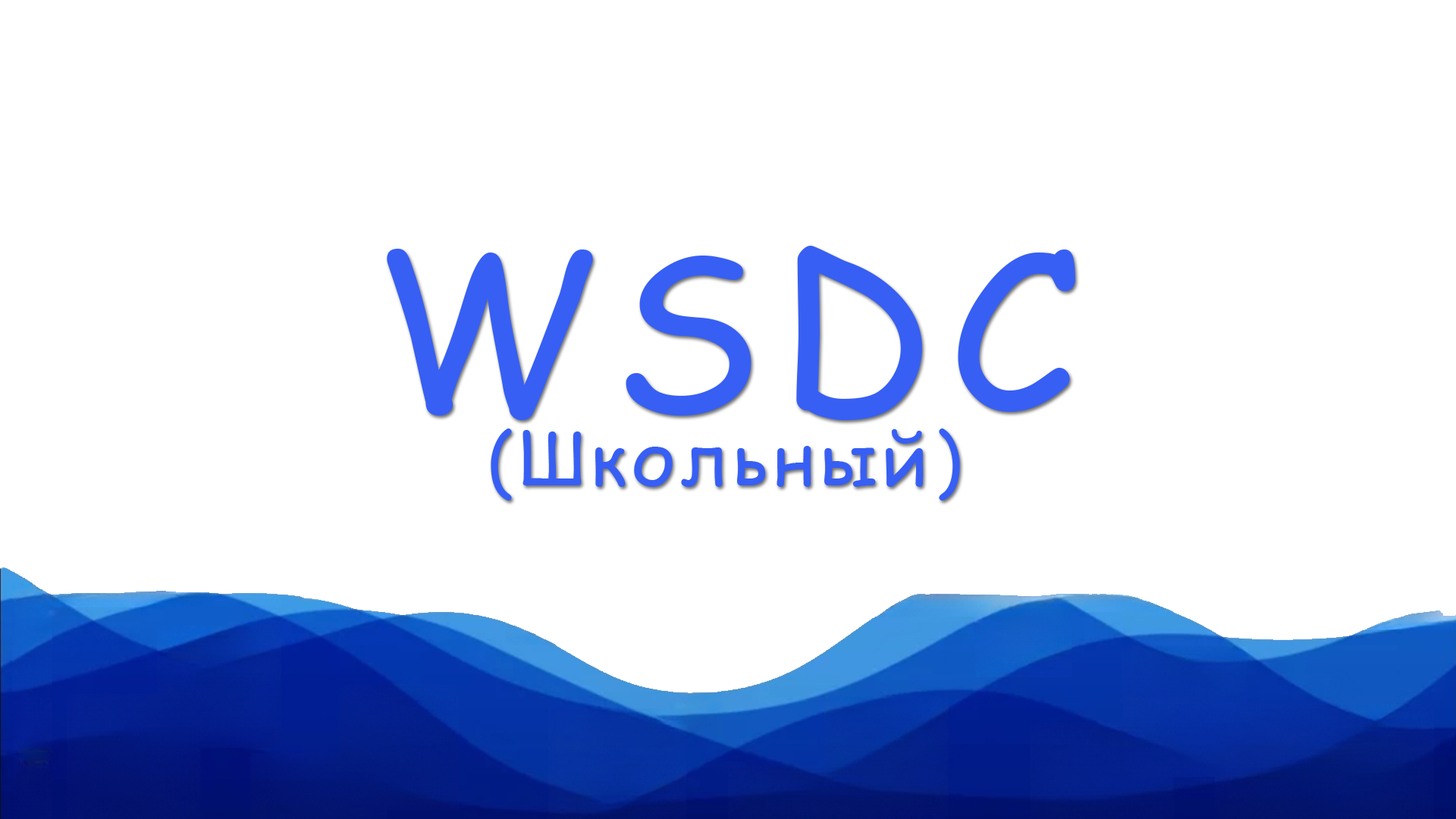
<style>
.page{position:relative;width:1456px;height:819px;background:#ffffff}
.page>*{position:absolute;margin:0}
.t1{font:215.1px "ComicSansMS";letter-spacing:0.075em;color:#375ff4}
.t2{font:72.7px "ComicSansMS";letter-spacing:0.075em;color:#375ff4}
</style>
<div class="page">
<p class="t1" style="left:387px;top:246px;width:688px;height:174px">WSDC</p>
<p class="t2" style="left:491px;top:428px;width:469px;height:72px">(Школьный)</p>
</div>
